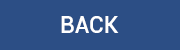
<style>
.page{position:relative;width:180px;height:50px;background:#2c4e85}
.page>*{position:absolute;margin:0}
.t1{font:22.9px "Roboto-Medium";color:#ffffff}
</style>
<div class="page">
<p class="t1" style="left:61px;top:16px;width:58px;height:17px">BACK</p>
</div>
